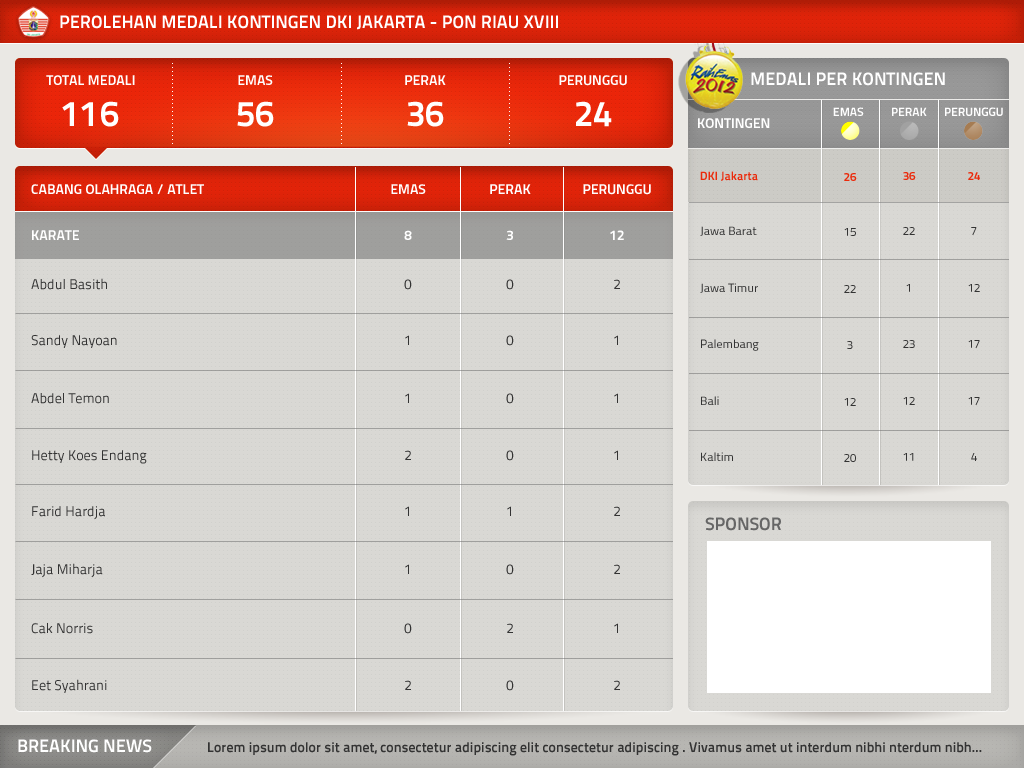
<style>
.page{position:relative;width:1024px;height:768px;background:#d9d8d4}
.page>*{position:absolute;margin:0}
.t1{font:18px "TitilliumText22L-Bold";color:#ffffff;text-transform:uppercase}
.t2{font:14px "TitilliumText22L-Bold";color:#ffffff;text-transform:uppercase}
.t3{font:36px "TitilliumText22L-Bold";color:#ffffff;text-transform:uppercase}
.t4{font:12px "TitilliumText22L-Bold";color:#ffffff}
.t5{font:14px "TitilliumText22L-Bold";color:#ffffff}
.t6{font:12px "TitilliumText22L-Bold";color:#eb2a0b}
.t7{font:12px "TitilliumText22L-Regular";color:#333333}
.t8{font:14px "TitilliumText22L-Regular";color:#333333}
.t9{font:18px "TitilliumText22L-Bold";color:#666666;text-transform:uppercase}
.t10{font:14px "TitilliumText22L-Bold";color:#333333}
</style>
<div class="page">
<p class="t1" style="left:60px;top:15px;width:498px;height:15px">PEROLEHAN MEDALI KONTINGEN DKI JAKARTA - PON RIAU XVIII</p>
<p class="t2" style="left:46px;top:75px;width:89px;height:10px">Total Medali</p>
<p class="t2" style="left:238px;top:75px;width:35px;height:10px">EMAS</p>
<p class="t2" style="left:405px;top:75px;width:41px;height:10px">PERAK</p>
<p class="t2" style="left:559px;top:75px;width:68px;height:11px">PERUNGGU</p>
<p class="t1" style="left:751px;top:72px;width:194px;height:14px">MEDALI PER KONTINGEN</p>
<p class="t3" style="left:62px;top:101px;width:57px;height:26px">116</p>
<p class="t3" style="left:237px;top:101px;width:37px;height:26px">56</p>
<p class="t3" style="left:407px;top:101px;width:37px;height:26px">36</p>
<p class="t3" style="left:576px;top:101px;width:36px;height:26px">24</p>
<p class="t4" style="left:833px;top:107px;width:31px;height:9px">EMAS</p>
<p class="t4" style="left:892px;top:107px;width:35px;height:9px">PERAK</p>
<p class="t4" style="left:945px;top:107px;width:58px;height:9px">PERUNGGU</p>
<p class="t5" style="left:698px;top:118px;width:72px;height:10px">KONTINGEN</p>
<p class="t6" style="left:700px;top:171px;width:58px;height:10px">DKI Jakarta</p>
<p class="t6" style="left:844px;top:173px;width:13px;height:8px">26</p>
<p class="t6" style="left:903px;top:172px;width:13px;height:8px">36</p>
<p class="t6" style="left:968px;top:172px;width:12px;height:8px">24</p>
<p class="t2" style="left:31px;top:184px;width:173px;height:11px">Cabang Olahraga / Atlet</p>
<p class="t2" style="left:391px;top:184px;width:35px;height:10px">Emas</p>
<p class="t2" style="left:490px;top:184px;width:41px;height:10px">Perak</p>
<p class="t2" style="left:583px;top:184px;width:68px;height:11px">Perunggu</p>
<p class="t5" style="left:32px;top:230px;width:47px;height:10px">KARATE</p>
<p class="t5" style="left:404px;top:230px;width:8px;height:10px">8</p>
<p class="t5" style="left:506px;top:230px;width:7px;height:10px">3</p>
<p class="t5" style="left:610px;top:230px;width:14px;height:10px">12</p>
<p class="t7" style="left:700px;top:226px;width:57px;height:10px">Jawa Barat</p>
<p class="t7" style="left:844px;top:228px;width:12px;height:8px">15</p>
<p class="t7" style="left:903px;top:227px;width:12px;height:8px">22</p>
<p class="t7" style="left:971px;top:227px;width:6px;height:9px">7</p>
<p class="t8" style="left:31px;top:278px;width:76px;height:12px">Abdul Basith</p>
<p class="t8" style="left:404px;top:279px;width:8px;height:11px">0</p>
<p class="t8" style="left:506px;top:279px;width:8px;height:11px">0</p>
<p class="t8" style="left:614px;top:279px;width:6px;height:10px">2</p>
<p class="t7" style="left:700px;top:283px;width:58px;height:10px">Jawa Timur</p>
<p class="t7" style="left:844px;top:285px;width:12px;height:8px">22</p>
<p class="t7" style="left:906px;top:284px;width:4px;height:8px">1</p>
<p class="t7" style="left:968px;top:284px;width:12px;height:8px">12</p>
<p class="t8" style="left:31px;top:335px;width:86px;height:13px">Sandy Nayoan</p>
<p class="t8" style="left:405px;top:335px;width:4px;height:10px">1</p>
<p class="t8" style="left:506px;top:335px;width:8px;height:11px">0</p>
<p class="t8" style="left:614px;top:335px;width:4px;height:10px">1</p>
<p class="t7" style="left:701px;top:339px;width:58px;height:12px">Palembang</p>
<p class="t7" style="left:847px;top:341px;width:6px;height:8px">3</p>
<p class="t7" style="left:903px;top:340px;width:12px;height:8px">23</p>
<p class="t7" style="left:968px;top:340px;width:12px;height:9px">17</p>
<p class="t8" style="left:31px;top:393px;width:78px;height:11px">Abdel Temon</p>
<p class="t8" style="left:405px;top:393px;width:4px;height:10px">1</p>
<p class="t8" style="left:506px;top:393px;width:8px;height:11px">0</p>
<p class="t8" style="left:614px;top:393px;width:4px;height:10px">1</p>
<p class="t7" style="left:701px;top:396px;width:18px;height:9px">Bali</p>
<p class="t7" style="left:844px;top:398px;width:12px;height:8px">12</p>
<p class="t7" style="left:903px;top:397px;width:12px;height:8px">12</p>
<p class="t7" style="left:968px;top:397px;width:12px;height:9px">17</p>
<p class="t8" style="left:32px;top:450px;width:115px;height:14px">Hetty Koes Endang</p>
<p class="t8" style="left:405px;top:450px;width:6px;height:10px">2</p>
<p class="t8" style="left:506px;top:450px;width:8px;height:11px">0</p>
<p class="t8" style="left:614px;top:450px;width:4px;height:10px">1</p>
<p class="t7" style="left:701px;top:452px;width:32px;height:9px">Kaltim</p>
<p class="t7" style="left:844px;top:454px;width:12px;height:8px">20</p>
<p class="t7" style="left:903px;top:453px;width:11px;height:8px">11</p>
<p class="t7" style="left:971px;top:453px;width:6px;height:8px">4</p>
<p class="t8" style="left:32px;top:506px;width:73px;height:14px">Farid Hardja</p>
<p class="t8" style="left:405px;top:506px;width:4px;height:10px">1</p>
<p class="t8" style="left:507px;top:506px;width:4px;height:10px">1</p>
<p class="t8" style="left:614px;top:506px;width:6px;height:10px">2</p>
<p class="t9" style="left:705px;top:517px;width:76px;height:14px">SPONSOR</p>
<p class="t8" style="left:31px;top:563px;width:72px;height:15px">Jaja Miharja</p>
<p class="t8" style="left:405px;top:564px;width:4px;height:10px">1</p>
<p class="t8" style="left:506px;top:564px;width:8px;height:11px">0</p>
<p class="t8" style="left:614px;top:564px;width:6px;height:10px">2</p>
<p class="t8" style="left:31px;top:623px;width:62px;height:11px">Cak Norris</p>
<p class="t8" style="left:404px;top:623px;width:8px;height:11px">0</p>
<p class="t8" style="left:507px;top:623px;width:6px;height:10px">2</p>
<p class="t8" style="left:614px;top:623px;width:4px;height:10px">1</p>
<p class="t8" style="left:32px;top:679px;width:75px;height:14px">Eet Syahrani</p>
<p class="t8" style="left:405px;top:680px;width:6px;height:10px">2</p>
<p class="t8" style="left:506px;top:680px;width:8px;height:11px">0</p>
<p class="t8" style="left:614px;top:680px;width:6px;height:10px">2</p>
<p class="t1" style="left:18px;top:739px;width:134px;height:14px">BREAKING NEWS</p>
<p class="t10" style="left:208px;top:742px;width:774px;height:14px">Lorem ipsum dolor sit amet, consectetur adipiscing elit consectetur adipiscing . Vivamus amet ut interdum nibhi nterdum nibh...</p>
</div>
